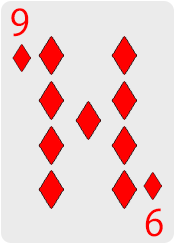
<style>
.page{position:relative;width:175px;height:244px;background:#ebebeb}
.page>*{position:absolute;margin:0}
.t1{font:36px "KozGoPr6N-Regular";color:#ff0000}
</style>
<div class="page">
<p class="t1" style="left:11px;top:8px;width:18px;height:29px">9</p>
<p class="t1" style="left:145px;top:208px;width:18px;height:29px;rotate:-180deg">9</p>
</div>
